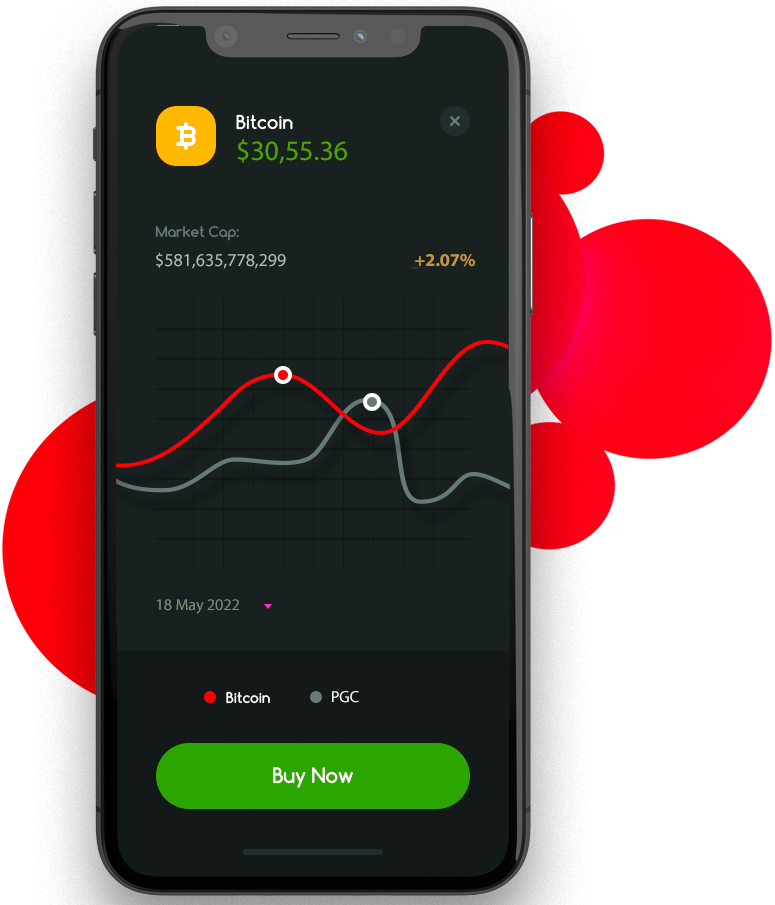
<style>
.page{position:relative;width:775px;height:905px;background:#182020}
.page>*{position:absolute;margin:0}
.t1{font:28px "MyriadPro-Regular";color:#4ca600}
.t2{font:18px "MyriadPro-Regular";color:#acbcc0}
.t3{font:18px "MyriadPro-Bold";color:#c59446}
.t4{font:16px "MyriadPro-Regular";color:#798f8c}
.t5{font:16px "MyriadPro-Regular";color:#ffffff}
</style>
<div class="page">
<p class="t1" style="left:237px;top:139px;width:110px;height:25px">$30,55.36</p>
<p class="t2" style="left:156px;top:252px;width:130px;height:17px">$581,635,778,299</p>
<p class="t3" style="left:415px;top:254px;width:60px;height:13px">+2.07%</p>
<p class="t4" style="left:157px;top:599px;width:82px;height:15px">18 May 2022</p>
<p class="t5" style="left:332px;top:691px;width:27px;height:12px">PGC</p>
</div>
